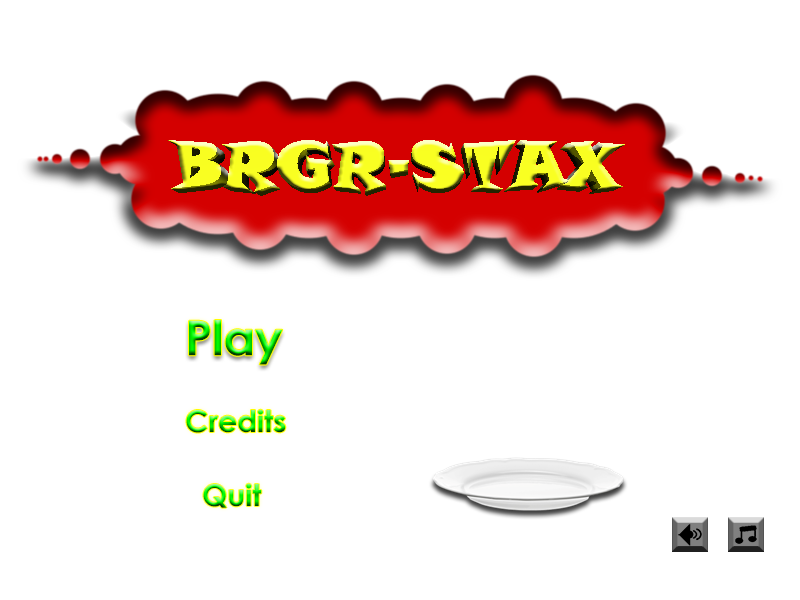
<style>
.page{position:relative;width:800px;height:600px;background:#ffffff}
.page>*{position:absolute;margin:0}
.t1{font:48px "CenturyGothic-Bold"}
.t2{font:30px "CenturyGothic-Bold"}
</style>
<div class="page">
<p class="t1" style="left:189px;top:320px;width:94px;height:45px">Play</p>
<p class="t2" style="left:186px;top:409px;width:100px;height:24px">Credits</p>
<p class="t2" style="left:203px;top:483px;width:59px;height:25px">Quit</p>
</div>
